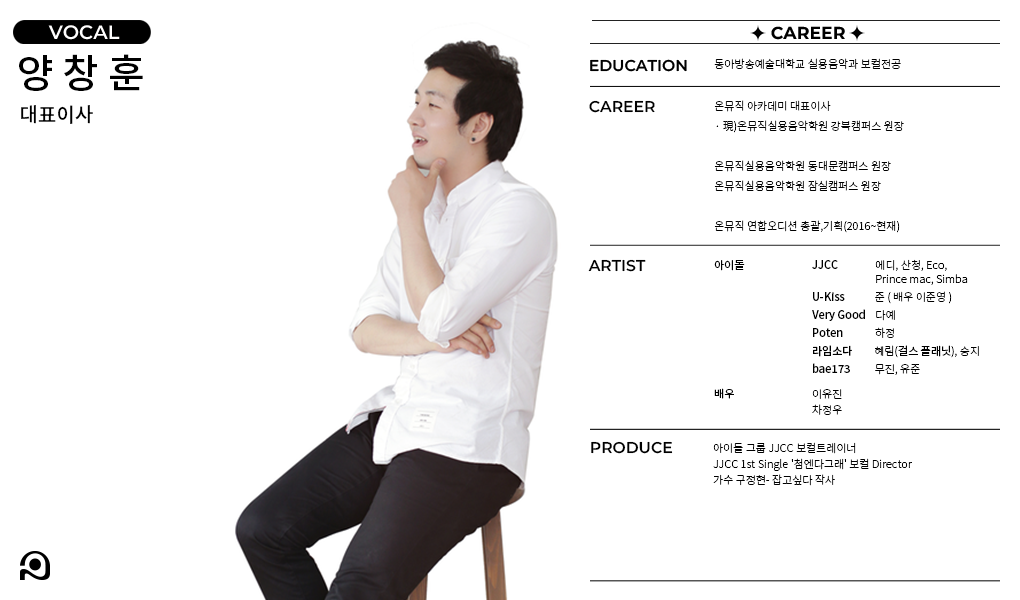
<style>
.page{position:relative;width:1020px;height:600px;background:#ffffff}
.page>*{position:absolute;margin:0}
.t1{font:19.4px "Montserrat-SemiBold";color:#fffefe}
.t2{font:17.3px "Montserrat-Bold";color:#000000}
.t3{font:39.9px "NotoSansKR-Medium";color:#000000}
.t4{font:15.7px "Montserrat-SemiBold";color:#000000}
.t5{font:11px "NotoSansKR-Light";color:#000000}
.t6{font:15.6px "Montserrat-SemiBold";color:#000000}
.t7{font:11px/20px "NotoSansKR-Light";color:#000000}
.t8{font:20px "NotoSansKR-Medium";color:#000000}
.t9{font:11px "NotoSansKR-Regular";color:#000000}
.t10{font:11px/14px "NotoSansKR-Light";color:#000000}
.t11{font:11px/14px "NotoSansKR-Medium";color:#000000}
.t12{font:11px/18px "NotoSansKR-Medium";color:#000000}
.t13{font:11px/18px "NotoSansKR-Light";color:#000000}
.t14{font:11px/18px "NotoSansKR-Regular";color:#000000}
.t15{font:11px/16px "NotoSansKR-Light";color:#000000}
</style>
<div class="page">
<p class="t1" style="left:48px;top:25px;width:72px;height:15px">VOCAL</p>
<p class="t2" style="left:771px;top:26px;width:74px;height:14px">CAREER</p>
<p class="t3" style="left:19px;top:54px;width:124px;height:37px">양 창 훈</p>
<p class="t4" style="left:590px;top:59px;width:97px;height:13px">EDUCATION</p>
<p class="t5" style="left:714px;top:58px;width:187px;height:11px">동아방송예술대학교 실용음악과 보컬전공</p>
<p class="t6" style="left:589px;top:100px;width:66px;height:13px">CAREER</p>
<p class="t7" style="left:714px;top:100px;width:190px;height:133px">온뮤직 아카데미 대표이사<br>· 現)온뮤직실용음악학원 강북캠퍼스 원장<br><br>온뮤직실용음악학원 동대문캠퍼스 원장<br>온뮤직실용음악학원 잠실캠퍼스 원장<br><br>온뮤직 연합오디션 총괄,기획(2016~현재)</p>
<p class="t8" style="left:21px;top:105px;width:72px;height:19px">대표이사</p>
<p class="t6" style="left:588px;top:259px;width:58px;height:13px">ARTIST</p>
<p class="t9" style="left:714px;top:260px;width:31px;height:11px">아이돌</p>
<p class="t10" style="left:812px;top:259px;width:167px;height:116px"><span class="t11">JJCC               </span>에디, 산청, Eco, <br>                          Prince mac, Simba<br><span class="t12">U-Kiss            </span><span class="t13">준 ( 배우 이준영 )<br></span><span class="t12">Very Good</span><span class="t13">    다예<br></span><span class="t12">Poten</span><span class="t13">             하정<br></span><span class="t12">라임소다</span><span class="t13">         혜림(</span><span class="t14">걸스 플래닛</span><span class="t13">), 승지<br></span><span class="t12">bae173</span><span class="t13">          무진, 유준</span></p>
<p class="t9" style="left:714px;top:388px;width:20px;height:11px">배우</p>
<p class="t15" style="left:812px;top:389px;width:30px;height:26px">이유진<br>차정우</p>
<p class="t6" style="left:591px;top:441px;width:82px;height:13px">PRODUCE</p>
<p class="t15" style="left:713px;top:442px;width:199px;height:44px">아이돌 그룹 JJCC 보컬트레이너<br>JJCC 1st Single '첨엔다그래' 보컬 Director<br>가수 구정현- 잡고싶다 작사</p>
</div>
